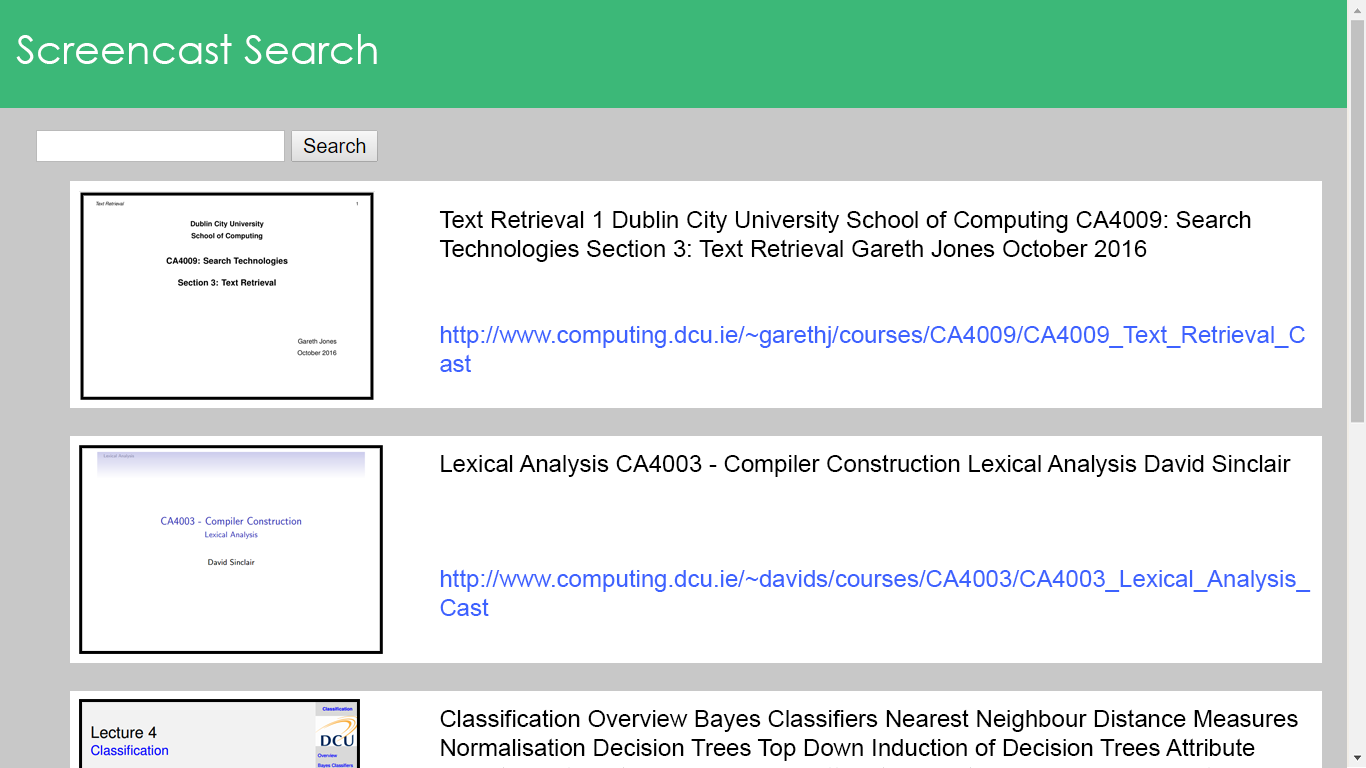
<style>
.page{position:relative;width:1366px;height:768px;background:#ffffff}
.page>*{position:absolute;margin:0}
.t1{font:40px "CenturyGothic";color:#ffffff}
.t2{font:24px "ArialMT";color:#000000}
.t3{font:24px "ArialMT";color:#3d62ff}
</style>
<div class="page">
<p class="t1" style="left:16px;top:34px;width:361px;height:30px">Screencast Search</p>
<p class="t2" style="left:439px;top:210px;width:866px;height:162px">Text Retrieval 1 Dublin City University School of Computing CA4009: Search Technologies Section 3: Text Retrieval Gareth Jones October 2016<br><br><br><span class="t3">http://www.computing.dcu.ie/~garethj/courses/CA4009/CA4009_Text_Retrieval_Cast</span></p>
<p class="t2" style="left:440px;top:454px;width:871px;height:162px">Lexical Analysis CA4003 - Compiler Construction Lexical Analysis David Sinclair<br><br><br><br><span class="t3">http://www.computing.dcu.ie/~davids/courses/CA4003/CA4003_Lexical_Analysis_Cast</span></p>
</div>
